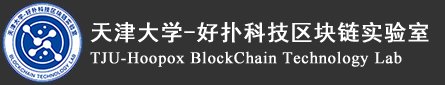
<style>
.page{position:relative;width:445px;height:85px;background:#333333}
.page>*{position:absolute;margin:0}
.t1{font:16px "TimesNewRomanPSMT";letter-spacing:0.04em;color:#ffffff;font-weight:bold}
.t2{font:22px/3.6px "SimHei";letter-spacing:0.04em;color:#ffffff;font-weight:bold}
</style>
<div class="page">
<p class="t1" style="left:90px;top:21px;width:339px;height:46px"><span class="t2">天津大学-好扑科技区块链实验室<br><br></span>TJU-Hoopox BlockChain Technology Lab</p>
</div>
